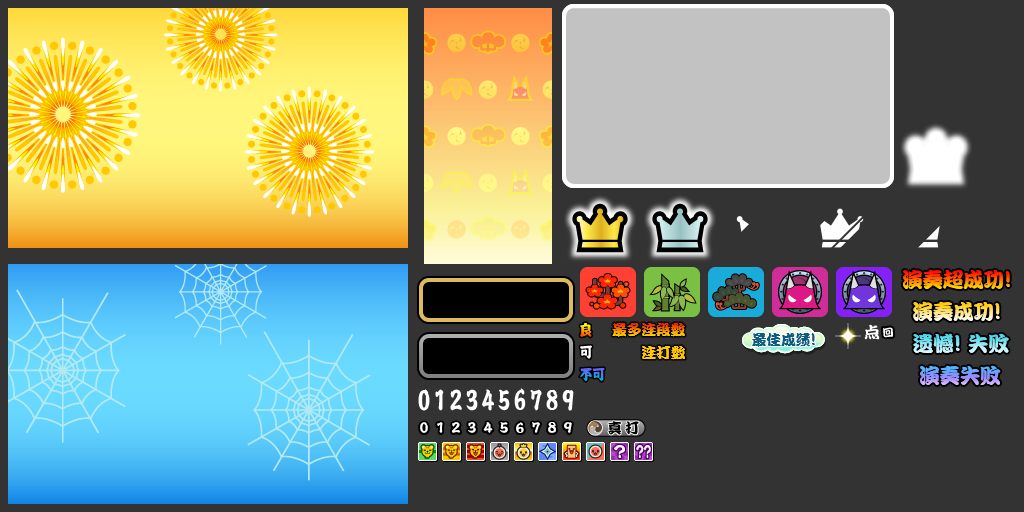
<style>
.page{position:relative;width:1024px;height:512px;background:#333333}
.page>*{position:absolute;margin:0}
.t1{font:21px "DFPKanTingLiuW9";letter-spacing:-0.03em}
.t2{font:23px "DFPKanTingLiuW9";letter-spacing:-0.03em}
.t3{font:15px "DFPKanTingLiuW9";letter-spacing:-0.03em}
.t4{font:15px "DFPKanTingLiuW9";letter-spacing:-0.02em;color:#085d83}
.t5{font:17px "DFPKanTingLiuW9";letter-spacing:-0.02em;color:#085d83}
.t6{font:21px "DFPKanTingLiuW9";letter-spacing:-0.02em}
.t7{font:23px "DFPKanTingLiuW9";letter-spacing:-0.02em}
.t8{font:15px "DFPKanTingLiuW9";letter-spacing:-0.03em;color:#ffc800}
</style>
<div class="page">
<p class="t1" style="left:903px;top:269px;width:107px;height:20px">演奏超成功<span class="t2">!</span></p>
<p class="t1" style="left:913px;top:301px;width:87px;height:20px">演奏成功<span class="t2">!</span></p>
<p class="t3" style="left:612px;top:323px;width:73px;height:14px">最多连段数</p>
<p class="t4" style="left:752px;top:333px;width:63px;height:14px">最佳成绩<span class="t5">!</span></p>
<p class="t6" style="left:913px;top:333px;width:96px;height:20px">遗憾<span class="t7">!</span> 失败</p>
<p class="t8" style="left:642px;top:346px;width:43px;height:14px">连打数</p>
<p class="t1" style="left:920px;top:365px;width:81px;height:20px">演奏失败</p>
</div>
